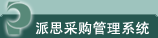
<style>
.page{position:relative;width:158px;height:38px;background:#265750}
.page>*{position:absolute;margin:0}
.t1{font:14px "SimHei";letter-spacing:0.025em;color:#ffffff}
</style>
<div class="page">
<p class="t1" style="left:35px;top:21px;width:114px;height:14px">派思采购管理系统</p>
</div>
